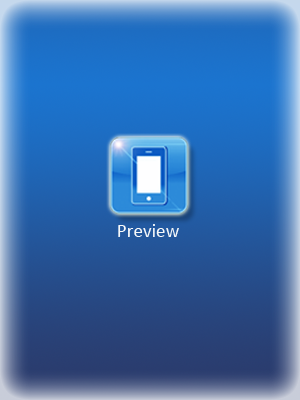
<style>
.page{position:relative;width:300px;height:400px}
.page>*{position:absolute;margin:0}
.t1{font:19.3px "Calibri";color:#f7f9fa}
</style>
<div class="page">
<p class="t1" style="left:118px;top:224px;width:61px;height:13px">Preview</p>
</div>
